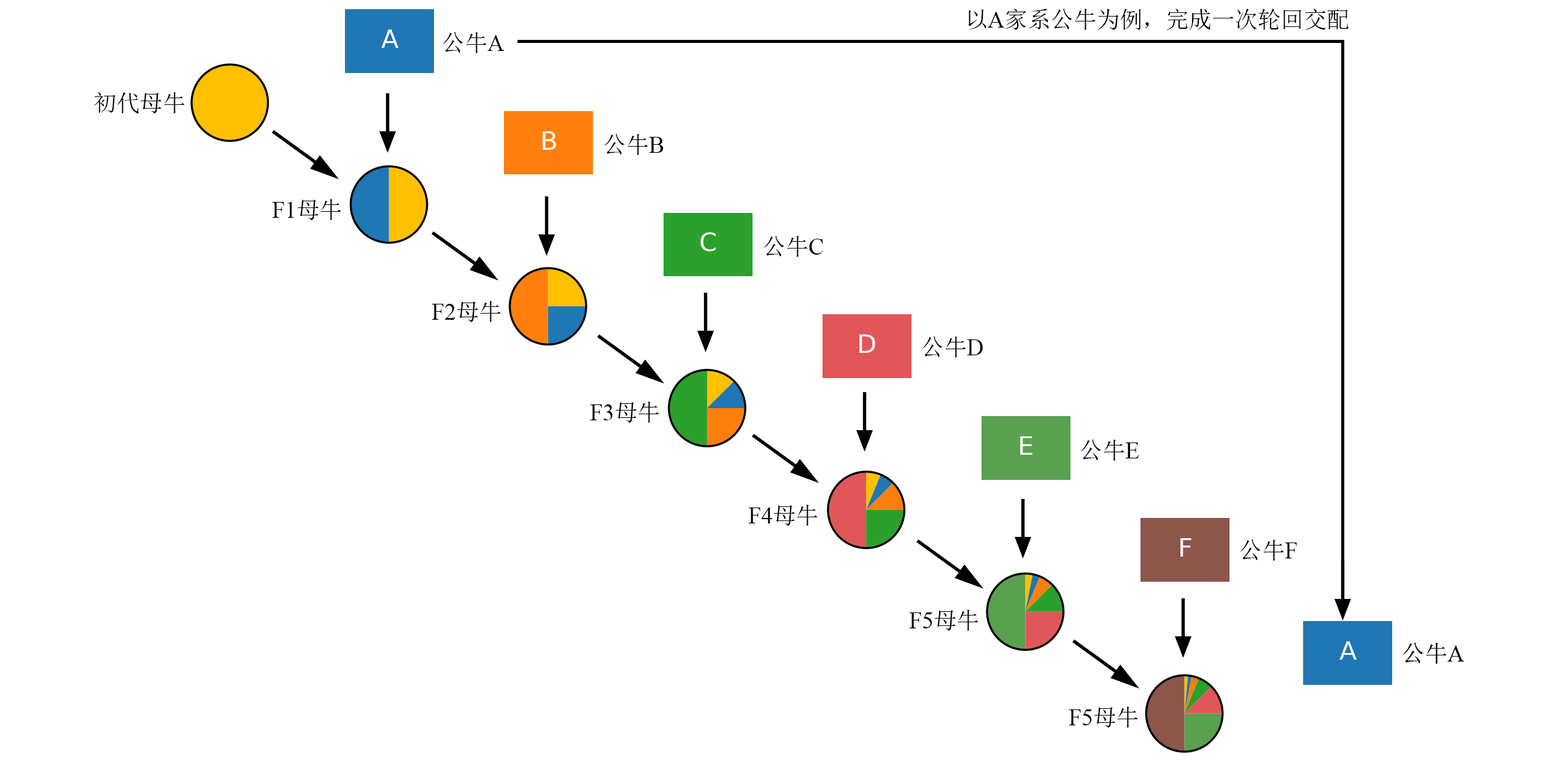
<style>
.page{position:relative;width:1545px;height:772px;background:#ffffff}
.page>*{position:absolute;margin:0}
.t1{font:23px "SimSun";color:#000000}
.t2{font:23px "TimesNewRomanPSMT";color:#000000}
</style>
<div class="page">
<p class="t1" style="left:968px;top:9px;width:381px;height:21px">以<span class="t2">A</span>家系公牛为例，完成一次轮回交配</p>
<p class="t1" style="left:442px;top:32px;width:62px;height:21px">公牛<span class="t2">A</span></p>
<p class="t1" style="left:94px;top:92px;width:91px;height:22px">初代母牛</p>
<p class="t1" style="left:604px;top:134px;width:59px;height:21px">公牛<span class="t2">B</span></p>
<p class="t2" style="left:272px;top:199px;width:69px;height:21px">F1<span class="t1">母牛</span></p>
<p class="t1" style="left:763px;top:236px;width:60px;height:21px">公牛<span class="t2">C</span></p>
<p class="t2" style="left:431px;top:301px;width:70px;height:21px">F2<span class="t1">母牛</span></p>
<p class="t1" style="left:922px;top:336px;width:60px;height:22px">公牛<span class="t2">D</span></p>
<p class="t2" style="left:590px;top:401px;width:69px;height:22px">F3<span class="t1">母牛</span></p>
<p class="t1" style="left:1080px;top:439px;width:59px;height:22px">公牛<span class="t2">E</span></p>
<p class="t2" style="left:748px;top:504px;width:69px;height:22px">F4<span class="t1">母牛</span></p>
<p class="t1" style="left:1240px;top:539px;width:57px;height:22px">公牛<span class="t2">F</span></p>
<p class="t2" style="left:909px;top:609px;width:69px;height:22px">F5<span class="t1">母牛</span></p>
<p class="t2" style="left:1068px;top:706px;width:70px;height:22px">F5<span class="t1">母牛</span></p>
</div>
